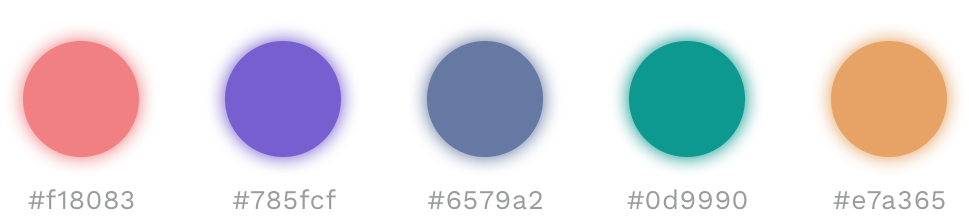
<style>
.page{position:relative;width:969px;height:224px;background:#ffffff}
.page>*{position:absolute;margin:0}
.t1{font:27px "WorkSans-Regular";letter-spacing:0.02em;color:#9b9d9d}
</style>
<div class="page">
<p class="t1" style="left:28px;top:189px;width:106px;height:21px">#f18083</p>
<p class="t1" style="left:233px;top:189px;width:103px;height:21px">#785fcf</p>
<p class="t1" style="left:428px;top:190px;width:114px;height:20px">#6579a2</p>
<p class="t1" style="left:627px;top:189px;width:120px;height:21px">#0d9990</p>
<p class="t1" style="left:833px;top:190px;width:112px;height:20px">#e7a365</p>
</div>
